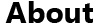
<style>
.page{position:relative;width:100px;height:25px;background:#ffffff}
.page>*{position:absolute;margin:0}
.t1{font:30px "Ebrima-Bold";color:#000000}
</style>
<div class="page">
<p class="t1" style="left:5px;top:1px;width:88px;height:22px">About</p>
</div>
